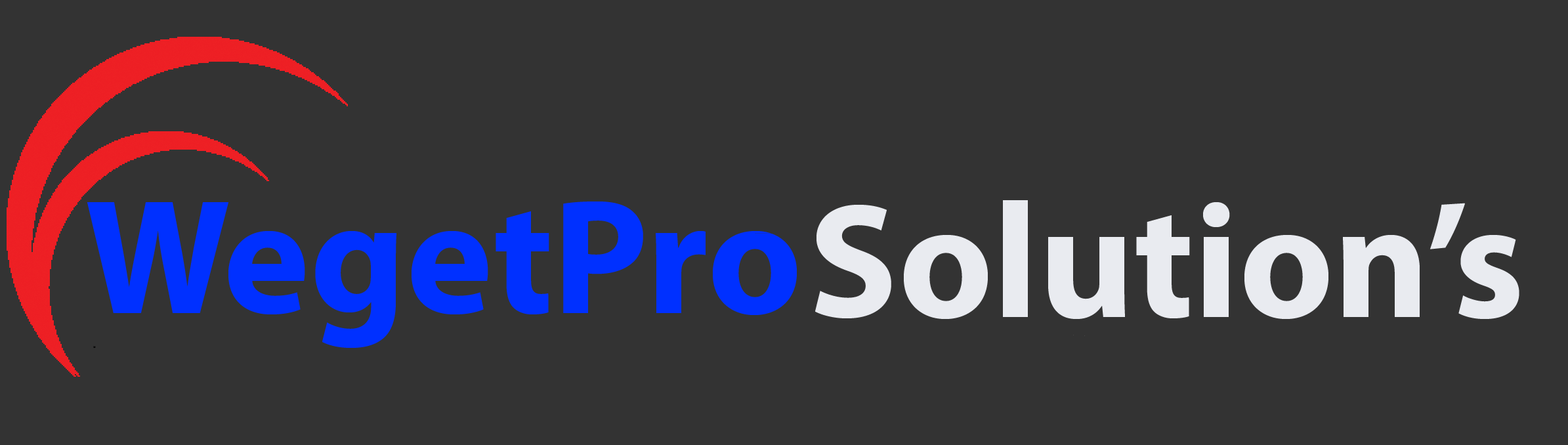
<style>
.page{position:relative;width:1568px;height:445px;background:#333333}
.page>*{position:absolute;margin:0}
.t1{font:164.1px "MyriadPro-Bold";color:#0030ff}
.t2{font:164.1px "MyriadPro-Bold";color:#e9ebf0}
</style>
<div class="page">
<p class="t1" style="left:87px;top:201px;width:710px;height:147px">WegetPro</p>
<p class="t2" style="left:815px;top:200px;width:704px;height:119px">Solution’s</p>
</div>
